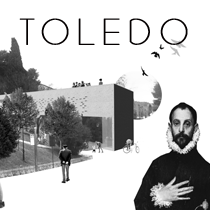
<style>
.page{position:relative;width:210px;height:210px;background:#ffffff}
.page>*{position:absolute;margin:0}
.t1{font:33.3px "SusannaRegular";letter-spacing:0.18em;color:#040000;font-weight:bold}
</style>
<div class="page">
<p class="t1" style="left:19px;top:18px;width:169px;height:27px">TOLEDO</p>
</div>
